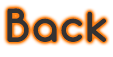
<style>
.page{position:relative;width:113px;height:57px;background:#ffffff}
.page>*{position:absolute;margin:0}
.t1{font:48px "Neon80s";color:#343232}
</style>
<div class="page">
<p class="t1" style="left:7px;top:8px;width:99px;height:34px">Back</p>
</div>
